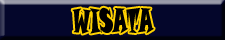
<style>
.page{position:relative;width:225px;height:40px;background:#04062b}
.page>*{position:absolute;margin:0}
.t1{font:33.3px "SnapITC-Regular";color:#000000;scale:0.5 1}
</style>
<div class="page">
<p class="t1" style="left:72px;top:7px;width:82px;height:27px">WISATA</p>
</div>
